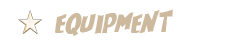
<style>
.page{position:relative;width:250px;height:45px;background:#ffffff}
.page>*{position:absolute;margin:0}
.t1{font:30px "HoustonComicsPersonalUse";color:#cdb99d}
</style>
<div class="page">
<p class="t1" style="left:55px;top:9px;width:118px;height:27px">EQUIPMENT</p>
</div>
